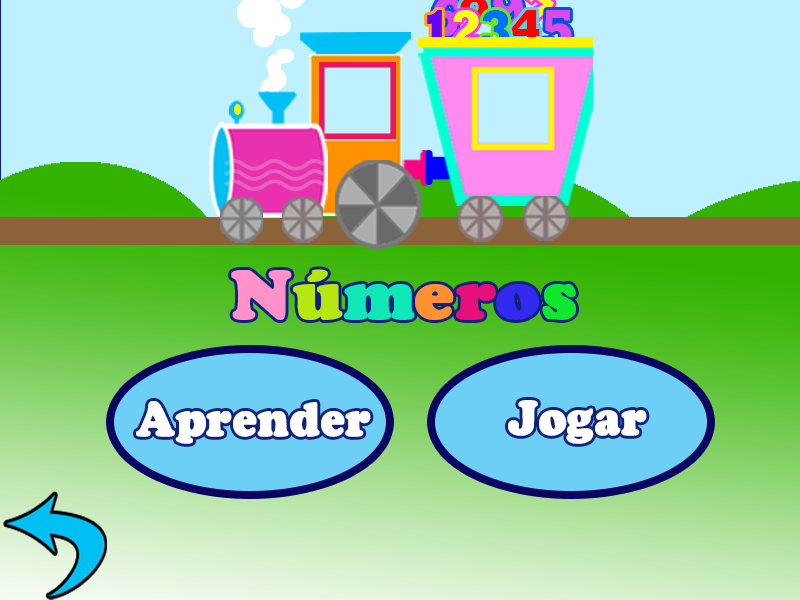
<style>
.page{position:relative;width:800px;height:600px;background:#bff0ff}
.page>*{position:absolute;margin:0}
.t1{font:13.6px/64.3px "Rockwell-ExtraBold";letter-spacing:-0.05em;scale:0.83 1}
.t2{font:13.6px/64.3px "Rockwell-ExtraBold";letter-spacing:-0.05em;color:#ff0000;scale:0.83 1}
.t3{font:66.4px "CooperBlackStd";color:#ff92c8;font-weight:bold;scale:1.04 1}
.t4{font:66.4px "CooperBlackStd";color:#b7e710;font-weight:bold;scale:1.04 1}
.t5{font:66.4px "CooperBlackStd";color:#10e7b7;font-weight:bold;scale:1.04 1}
.t6{font:66.4px "CooperBlackStd";color:#ff9130;font-weight:bold;scale:1.04 1}
.t7{font:66.4px "CooperBlackStd";color:#e7107a;font-weight:bold;scale:1.04 1}
.t8{font:66.4px "CooperBlackStd";color:#3329ef;font-weight:bold;scale:1.04 1}
.t9{font:66.4px "CooperBlackStd";color:#10e72f;font-weight:bold;scale:1.04 1}
.t10{font:46.4px "CooperBlackStd";color:#ffffff;font-weight:bold;scale:0.94 1}
</style>
<div class="page">
<p class="t1" style="left:427px;top:10px;width:20px;height:40px">1</p>
<p class="t1" style="left:453px;top:10px;width:26px;height:39px">2</p>
<p class="t1" style="left:482px;top:10px;width:28px;height:39px">3</p>
<p class="t2" style="left:511px;top:10px;width:29px;height:39px">4</p>
<p class="t1" style="left:543px;top:10px;width:29px;height:39px">5</p>
<p class="t3" style="left:231px;top:269px;width:345px;height:51px">N<span class="t4">ú</span><span class="t5">m</span><span class="t6">e</span><span class="t7">r</span><span class="t8">o</span><span class="t9">s</span></p>
<p class="t10" style="left:136px;top:401px;width:235px;height:43px">Aprender</p>
<p class="t10" style="left:508px;top:400px;width:139px;height:44px">Jogar</p>
</div>
